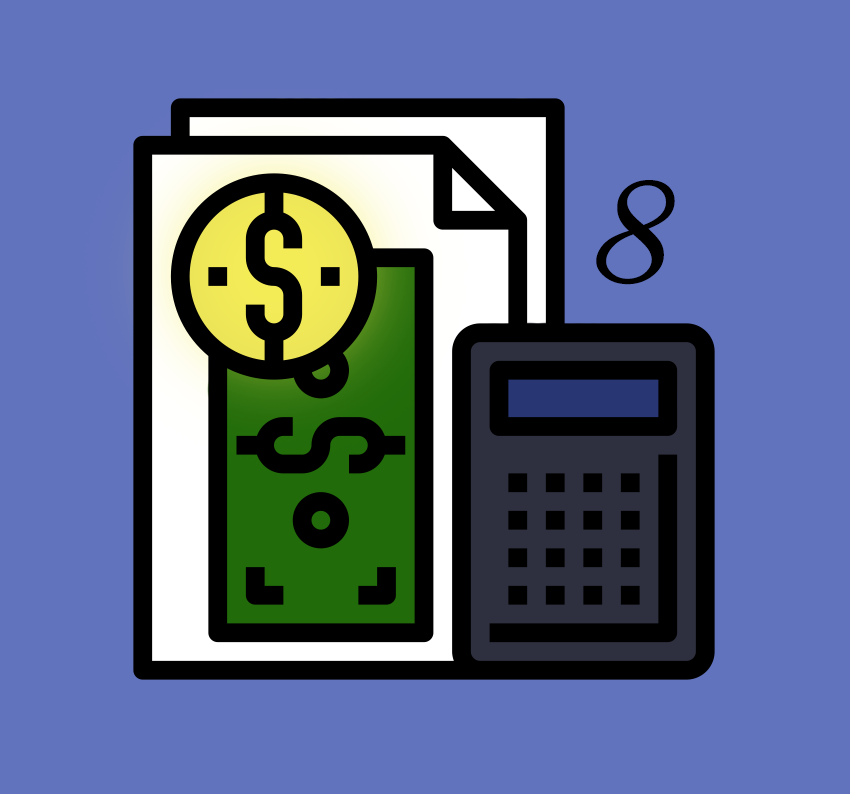
<style>
.page{position:relative;width:850px;height:794px;background:#6273bd}
.page>*{position:absolute;margin:0}
.t1{font:147.6px "CenturySchoolbook-Italic";color:#000000;scale:1.05 1}
</style>
<div class="page">
<p class="t1" style="left:596px;top:180px;width:79px;height:105px">8</p>
</div>
